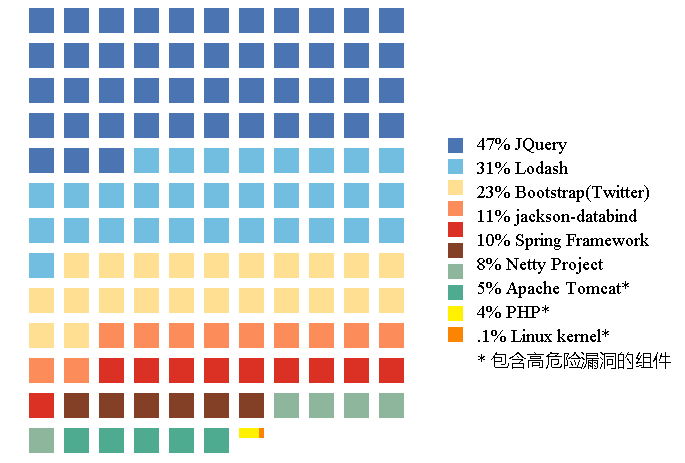
<style>
.page{position:relative;width:685px;height:463px;background:#ffffff}
.page>*{position:absolute;margin:0}
.t1{font:18px/24px "TimesNewRomanPSMT";color:#000000}
.t2{font:18px/24px "MicrosoftYaHei";color:#000000}
</style>
<div class="page">
<p class="t1" style="left:477px;top:138px;width:194px;height:231px">47% JQuery<br>31% Lodash<br>23% Bootstrap(Twitter)<br>11% jackson-databind<br>10% Spring Framework<br>8% Netty Project<br>5% Apache Tomcat*<br>4% PHP*<br>.1% Linux kernel*<br>* <span class="t2">包含高危险漏洞的组件</span></p>
</div>
